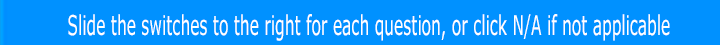
<style>
.page{position:relative;width:720px;height:45px;background:#0091ff}
.page>*{position:absolute;margin:0}
.t1{font:27.3px "Verdana";color:#ffffff;scale:0.57 1}
</style>
<div class="page">
<p class="t1" style="left:68px;top:14px;width:602px;height:27px">Slide the switches to the right for each question, or click N/A if not applicable</p>
</div>
